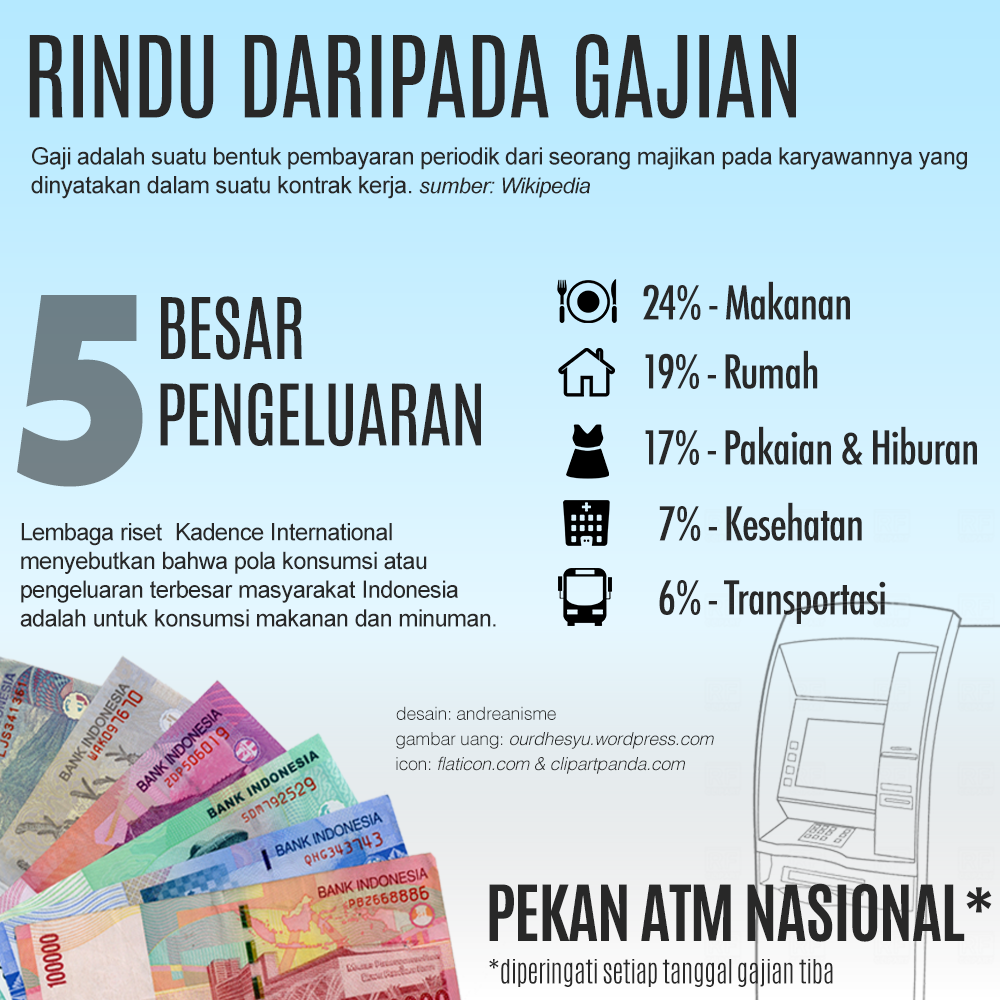
<style>
.page{position:relative;width:1000px;height:1000px}
.page>*{position:absolute;margin:0}
.t1{font:96px "Antonio-Regular";letter-spacing:-0.025em;color:#282828}
.t2{font:24px "ArialMT";letter-spacing:-0.025em;color:#282828}
.t3{font:22px "Arial-ItalicMT";letter-spacing:-0.025em;color:#282828}
.t4{font:45.6px "Futura-CondensedMedium";letter-spacing:-0.025em;color:#282828}
.t5{font:253.8px "Futura-CondensedExtraBold";letter-spacing:-0.025em;color:#708087}
.t6{font:72px "Antonio-Regular";letter-spacing:-0.025em;color:#282828}
.t7{font:12px "ArialMT";letter-spacing:-0.025em;color:#282828}
.t8{font:18px "Helvetica-Light";letter-spacing:-0.025em;color:#282828}
.t9{font:18px "Helvetica-LightOblique";letter-spacing:-0.025em;color:#282828}
.t10{font:65.7px "Antonio-Bold";letter-spacing:-0.025em;color:#282828}
.t11{font:28px "Antonio-Light";letter-spacing:-0.025em;color:#282828}
</style>
<div class="page">
<p class="t1" style="left:29px;top:34px;width:767px;height:85px">RINDU DARIPADA GAJIAN</p>
<p class="t2" style="left:31px;top:147px;width:936px;height:52px;text-align:justify">Gaji adalah suatu bentuk pembayaran periodik dari seorang majikan pada karyawannya yang dinyatakan dalam suatu kontrak kerja. <span class="t3">sumber: Wikipedia</span></p>
<p class="t4" style="left:643px;top:281px;width:207px;height:39px">24% - Makanan</p>
<p class="t5" style="left:17px;top:295px;width:126px;height:192px">5</p>
<p class="t6" style="left:160px;top:296px;width:321px;height:151px">BESAR<br>PENGELUARAN</p>
<p class="t4" style="left:645px;top:350px;width:173px;height:39px">19% - Rumah</p>
<p class="t4" style="left:645px;top:426px;width:332px;height:39px">17% - Pakaian &amp; Hiburan</p>
<p class="t4" style="left:659px;top:502px;width:203px;height:39px">7% - Kesehatan</p>
<p class="t7" style="left:20px;top:523px;width:476px;height:104px">Lembaga riset  Kadence International menyebutkan bahwa pola konsumsi atau pengeluaran terbesar masyarakat Indonesia adalah untuk konsumsi makanan dan minuman.</p>
<p class="t4" style="left:659px;top:580px;width:227px;height:44px">6% - Transportasi</p>
<p class="t8" style="left:396px;top:706px;width:160px;height:14px">desain: andreanisme</p>
<p class="t9" style="left:396px;top:732px;width:318px;height:17px"><span class="t8">gambar uang: </span>ourdhesyu.wordpress.com</p>
<p class="t9" style="left:396px;top:756px;width:289px;height:18px"><span class="t8">icon: </span>flaticon.com &amp; clipartpanda.com</p>
<p class="t10" style="left:489px;top:883px;width:503px;height:59px">PEKAN ATM NASIONAL*</p>
<p class="t11" style="left:489px;top:959px;width:344px;height:28px">*diperingati setiap tanggal gajian tiba</p>
</div>
